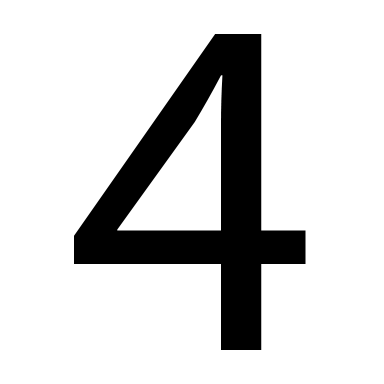
<style>
.page{position:relative;width:384px;height:384px;background:#ffffff}
.page>*{position:absolute;margin:0}
.t1{font:486.1px "MyriadPro-Regular";color:#000000}
</style>
<div class="page">
<p class="t1" style="left:74px;top:34px;width:232px;height:316px">4</p>
</div>
